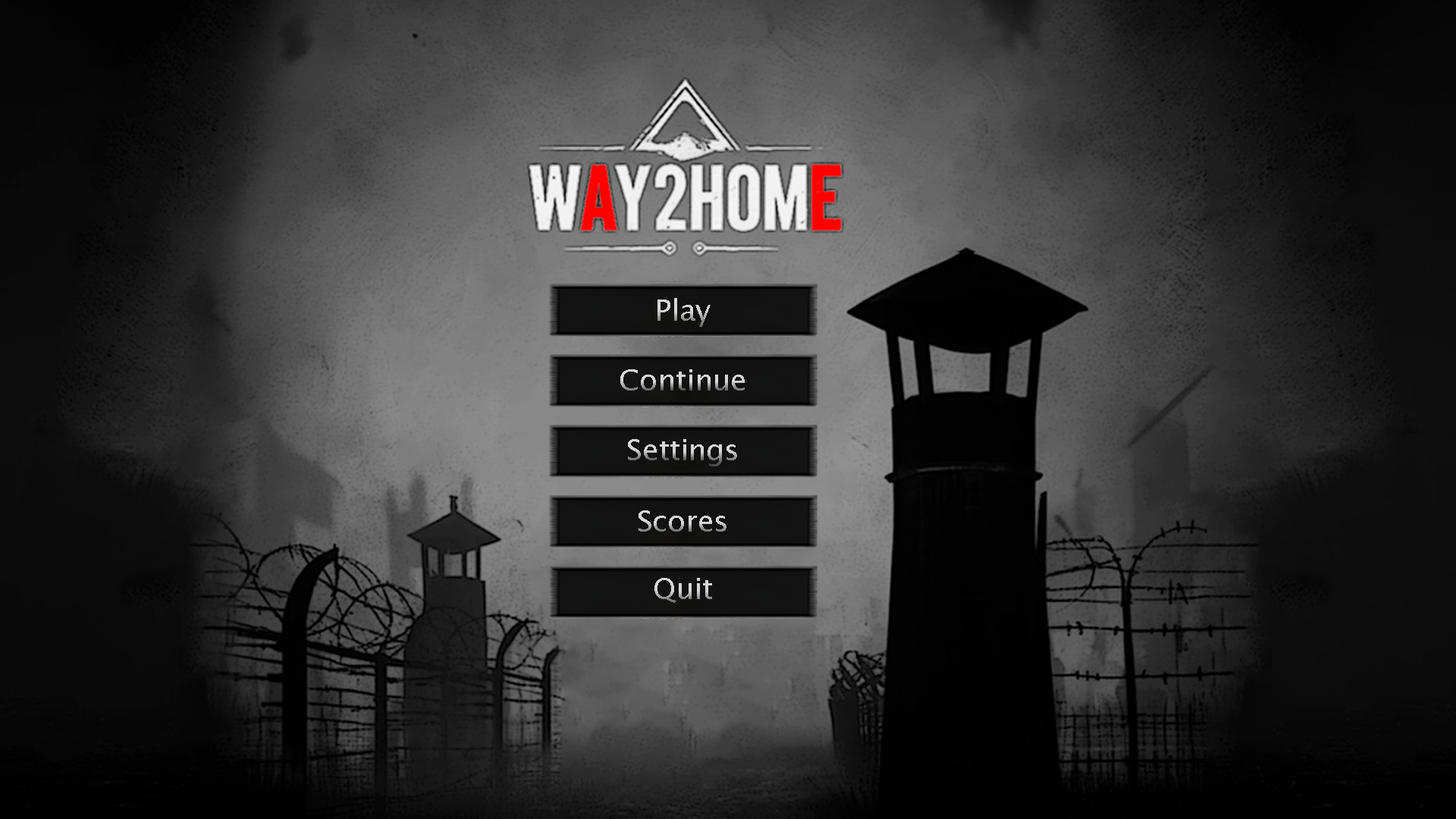
<style>
.page{position:relative;width:1456px;height:819px}
.page>*{position:absolute;margin:0}
.t1{font:29.5px "LucidaSansUnicode"}
</style>
<div class="page">
<p class="t1" style="left:657px;top:298px;width:54px;height:29px">Play</p>
<p class="t1" style="left:620px;top:369px;width:125px;height:22px">Continue</p>
<p class="t1" style="left:628px;top:439px;width:109px;height:27px">Settings</p>
<p class="t1" style="left:639px;top:510px;width:87px;height:22px">Scores</p>
<p class="t1" style="left:654px;top:578px;width:58px;height:25px">Quit</p>
</div>
